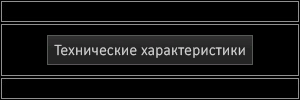
<style>
.page{position:relative;width:300px;height:100px;background:#000000}
.page>*{position:absolute;margin:0}
.t1{font:16px "Calibri-Light";letter-spacing:0.02em;color:#d7d7d7;scale:0.96 1}
</style>
<div class="page">
<p class="t1" style="left:54px;top:44px;width:191px;height:14px">Технические характеристики</p>
</div>
